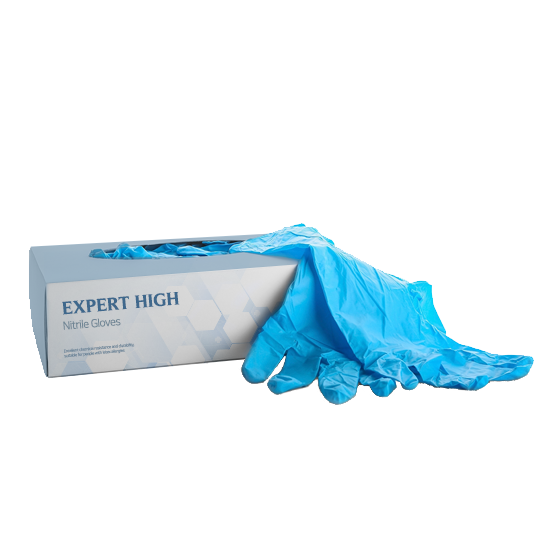
<style>
.page{position:relative;width:550px;height:550px;background:#ffffff}
.page>*{position:absolute;margin:0}
.t1{font:18px "Timeless-Bold";color:#3f688c}
.t2{font:11px "NanumSquareR";letter-spacing:-0.05em;color:#718695}
.t3{font:4px "NanumSquareR";letter-spacing:-0.05em;color:#6b8498}
</style>
<div class="page">
<p class="t1" style="left:62px;top:291px;width:118px;height:24px;rotate:-5deg">EXPERT HIGH</p>
<p class="t2" style="left:63px;top:318px;width:58px;height:12px;rotate:-5deg">Nitrile Gloves</p>
<p class="t3" style="left:63px;top:343px;width:72px;height:15px;rotate:-5deg">Excellent chemical resistance and durability, <br>suitable for people with latex allergies</p>
</div>
